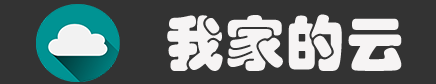
<style>
.page{position:relative;width:436px;height:84px;background:#333333}
.page>*{position:absolute;margin:0}
.t1{font:60px "STHupo";color:#f6f4f4}
</style>
<div class="page">
<p class="t1" style="left:167px;top:14px;width:235px;height:57px">我家的云</p>
</div>
